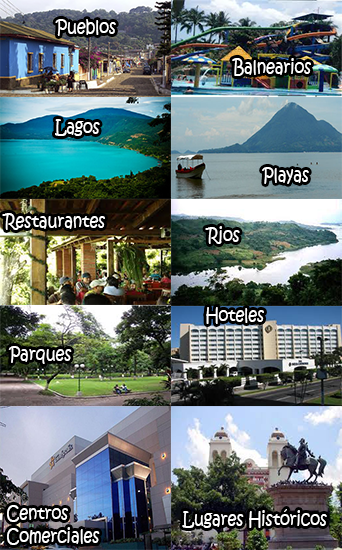
<style>
.page{position:relative;width:342px;height:550px}
.page>*{position:absolute;margin:0}
.t1{font:19.3px "KristenITC-Regular";color:#ffffff;scale:0.8 1}
</style>
<div class="page">
<p class="t1" style="left:55px;top:19px;width:61px;height:17px">Pueblos</p>
<p class="t1" style="left:232px;top:58px;width:79px;height:18px">Balnearios</p>
<p class="t1" style="left:55px;top:119px;width:45px;height:17px">Lagos</p>
<p class="t1" style="left:262px;top:167px;width:47px;height:17px">Playas</p>
<p class="t1" style="left:2px;top:213px;width:103px;height:17px">Restaurantes</p>
<p class="t1" style="left:205px;top:226px;width:35px;height:18px">Rios</p>
<p class="t1" style="left:206px;top:307px;width:58px;height:17px">Hoteles</p>
<p class="t1" style="left:8px;top:346px;width:64px;height:18px">Parques</p>
<p class="t1" style="left:7px;top:505px;width:93px;height:40px">Centros <br>Comerciales</p>
<p class="t1" style="left:182px;top:509px;width:145px;height:19px">Lugares Históricos</p>
</div>
